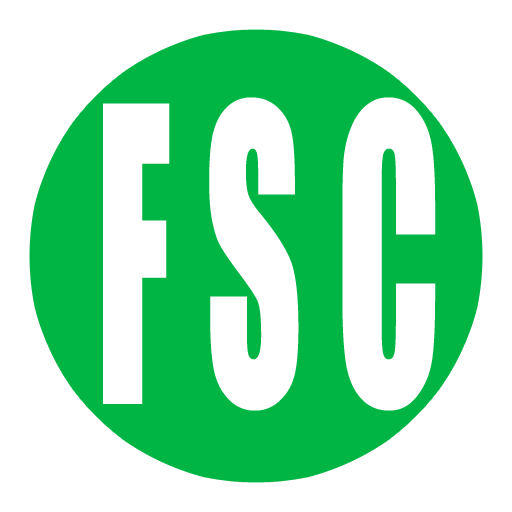
<style>
.page{position:relative;width:512px;height:512px;background:#ffffff}
.page>*{position:absolute;margin:0}
.t1{font:380px "Impact";color:#ffffff;scale:0.5 1}
</style>
<div class="page">
<p class="t1" style="left:103px;top:97px;width:333px;height:314px">F S C</p>
</div>
